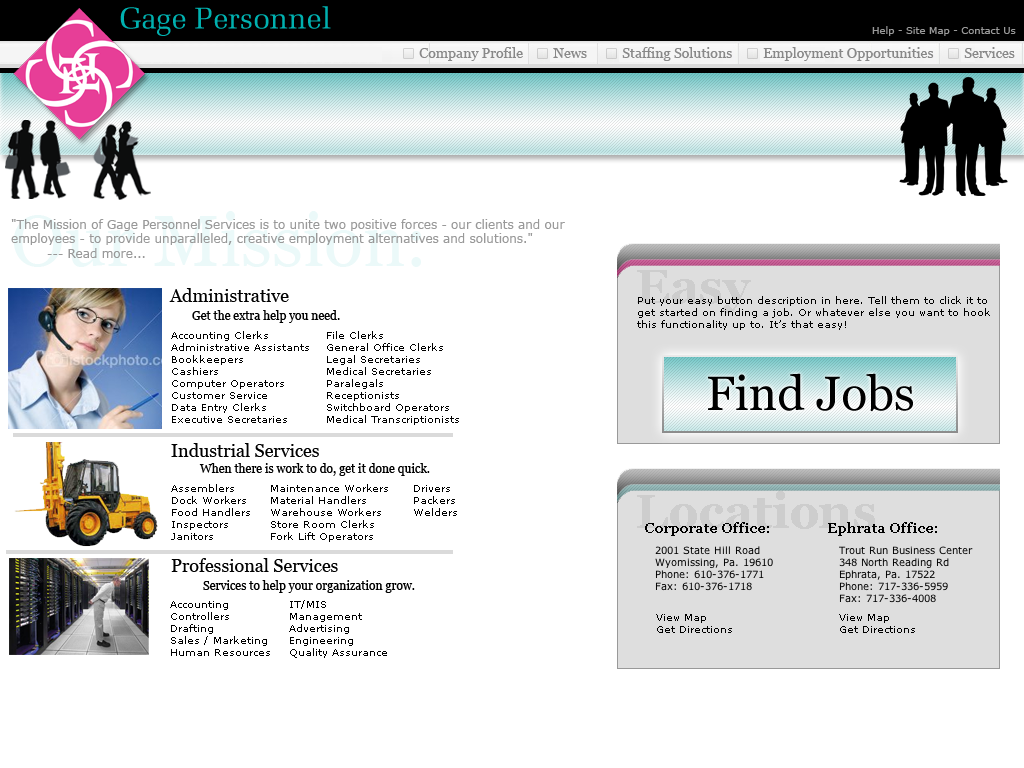
<style>
.page{position:relative;width:1024px;height:768px;background:#ffffff}
.page>*{position:absolute;margin:0}
.t1{font:30px "Melior";color:#00b1b0}
.t2{font:10px "Verdana";color:#999999}
.t3{font:14px "Georgia";color:#9e9e9e}
.t4{font:12px "Verdana";color:#999999}
.t5{font:18px "Georgia";color:#000000}
.t6{font:10px "Verdana";color:#000000}
.t7{font:12px "Georgia";color:#000000}
.t8{font:48px "Georgia";color:#000000}
.t9{font:14px "Georgia-Bold";color:#000000}
</style>
<div class="page">
<p class="t1" style="left:120px;top:6px;width:211px;height:30px">Gage Personnel</p>
<p class="t2" style="left:872px;top:26px;width:144px;height:10px">Help - Site Map - Contact Us</p>
<p class="t3" style="left:419px;top:47px;width:104px;height:14px">Company Profile</p>
<p class="t3" style="left:553px;top:48px;width:34px;height:10px">News</p>
<p class="t3" style="left:622px;top:47px;width:110px;height:14px">Staffing Solutions</p>
<p class="t3" style="left:763px;top:47px;width:171px;height:14px">Employment Opportunities</p>
<p class="t3" style="left:964px;top:47px;width:51px;height:11px">Services</p>
<p class="t4" style="left:11px;top:219px;width:554px;height:39px">"The Mission of Gage Personnel Services is to unite two positive forces - our clients and our <br>employees - to provide unparalleled, creative employment alternatives and solutions."<br> --- Read more...</p>
<p class="t5" style="left:169px;top:288px;width:120px;height:14px">Administrative</p>
<p class="t6" style="left:637px;top:296px;width:353px;height:34px">Put your easy button description in here. Tell them to click it to <br>get started on finding a job. Or whatever else you want to hook<br>this functionality up to. It’s that easy!</p>
<p class="t7" style="left:192px;top:310px;width:148px;height:13px">Get the extra help you need.</p>
<p class="t6" style="left:171px;top:331px;width:138px;height:92px">Accounting Clerks<br>Administrative Assistants<br>Bookkeepers<br>Cashiers<br>Computer Operators<br>Customer Service<br>Data Entry Clerks<br>Executive Secretaries</p>
<p class="t6" style="left:327px;top:331px;width:132px;height:94px">File Clerks<br>General Office Clerks<br>Legal Secretaries<br>Medical Secretaries<br>Paralegals<br>Receptionists<br>Switchboard Operators<br>Medical Transcriptionists</p>
<p class="t8" style="left:708px;top:373px;width:205px;height:39px">Find Jobs</p>
<p class="t5" style="left:171px;top:443px;width:148px;height:14px">Industrial Services</p>
<p class="t7" style="left:199px;top:463px;width:231px;height:13px">When there is work to do, get it done quick.</p>
<p class="t6" style="left:171px;top:484px;width:79px;height:56px">Assemblers<br>Dock Workers<br>Food Handlers<br>Inspectors<br>Janitors</p>
<p class="t6" style="left:271px;top:484px;width:117px;height:58px">Maintenance Workers<br>Material Handlers<br>Warehouse Workers<br>Store Room Clerks<br>Fork Lift Operators</p>
<p class="t6" style="left:414px;top:485px;width:43px;height:31px">Drivers<br>Packers<br>Welders</p>
<p class="t9" style="left:645px;top:522px;width:124px;height:14px">Corporate Office:</p>
<p class="t9" style="left:828px;top:522px;width:109px;height:14px">Ephrata Office:</p>
<p class="t5" style="left:171px;top:558px;width:167px;height:14px">Professional Services</p>
<p class="t7" style="left:203px;top:580px;width:212px;height:13px">Services to help your organization grow.</p>
<p class="t6" style="left:170px;top:601px;width:100px;height:55px">Accounting<br>Controllers<br>Drafting<br>Sales / Marketing<br>Human Resources</p>
<p class="t6" style="left:289px;top:600px;width:98px;height:58px">IT/MIS<br>Management<br>Advertising<br>Engineering<br>Quality Assurance</p>
<p class="t6" style="left:656px;top:614px;width:76px;height:19px">View Map<br>Get Directions</p>
<p class="t6" style="left:839px;top:614px;width:76px;height:19px">View Map<br>Get Directions</p>
</div>
